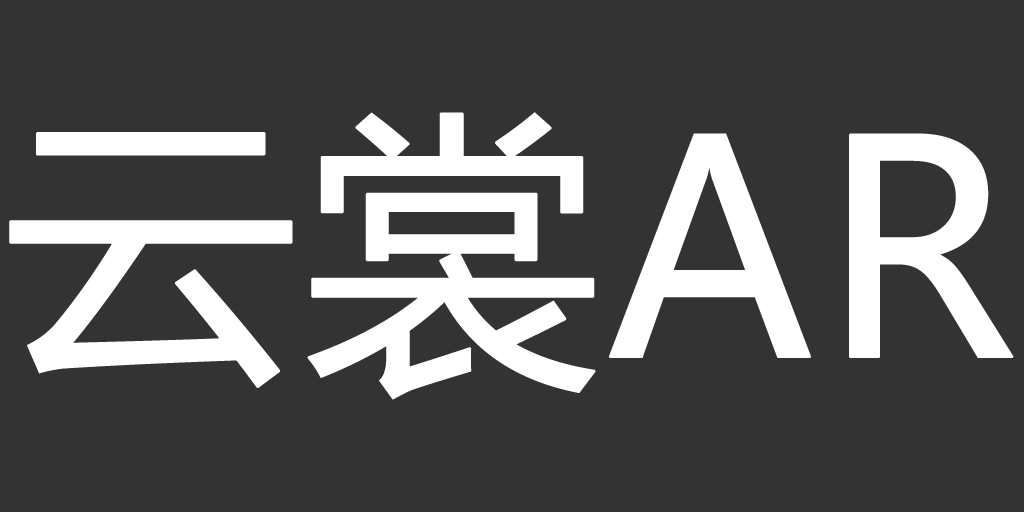
<style>
.page{position:relative;width:1024px;height:512px;background:#333333}
.page>*{position:absolute;margin:0}
.t1{font:294px "MicrosoftYaHei";color:#ffffff;font-weight:bold}
</style>
<div class="page">
<p class="t1" style="left:9px;top:112px;width:1005px;height:288px">云裳AR</p>
</div>
